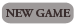
<style>
.page{position:relative;width:75px;height:28px;background:#9e9a9a}
.page>*{position:absolute;margin:0}
.t1{font:12px "AGaramondPro-Bold";color:#3a2e2e}
</style>
<div class="page">
<p class="t1" style="left:5px;top:9px;width:66px;height:9px">NEW GAME</p>
</div>
